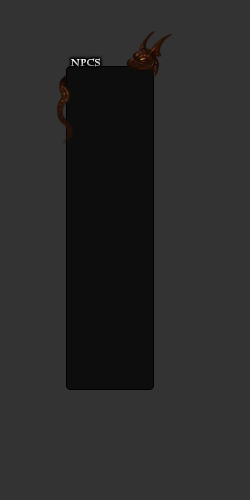
<style>
.page{position:relative;width:250px;height:500px;background:#333333}
.page>*{position:absolute;margin:0}
.t1{font:10px "CharlemagneStd-Bold"}
</style>
<div class="page">
<p class="t1" style="left:71px;top:58px;width:29px;height:9px">NPCs</p>
</div>
